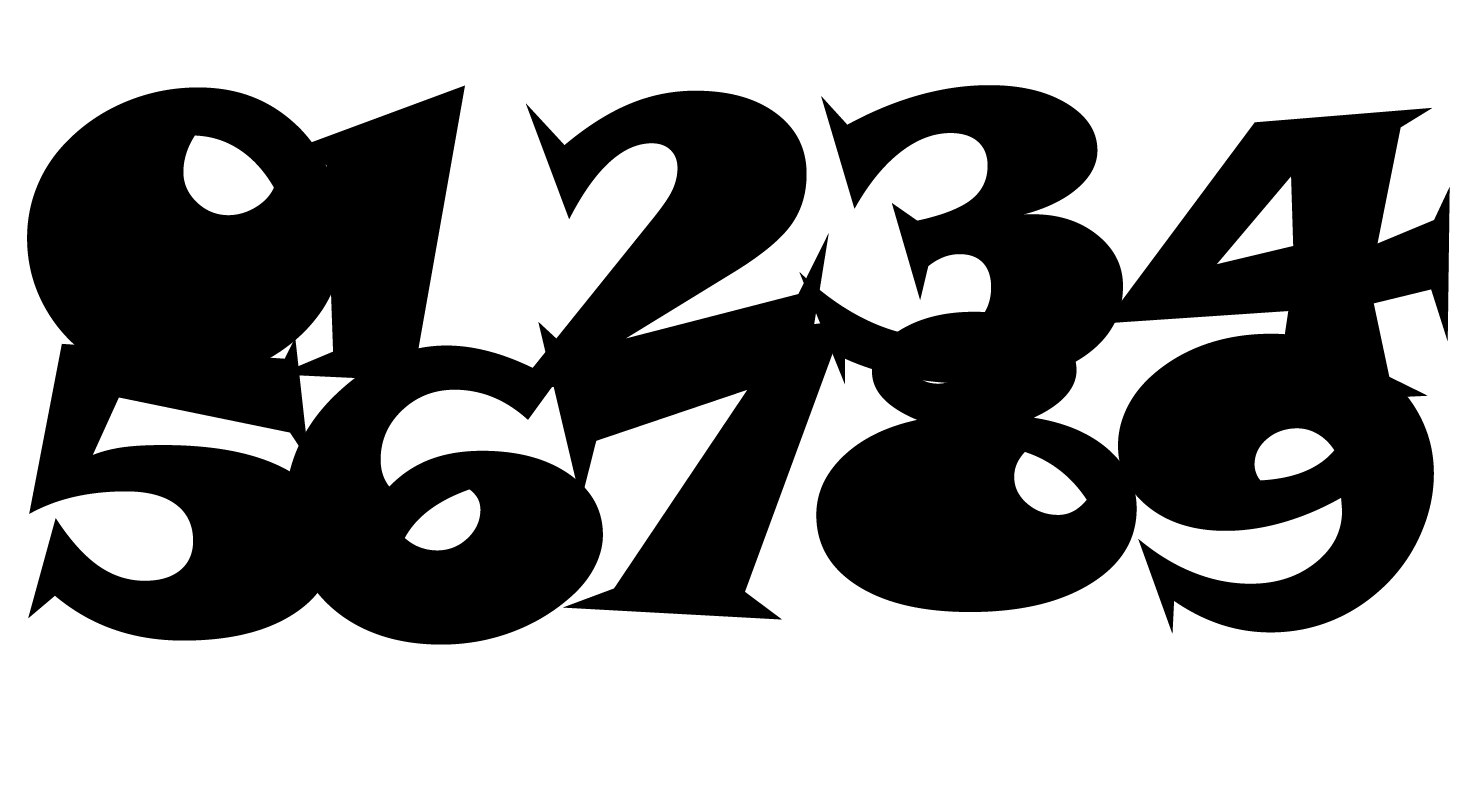
<style>
.page{position:relative;width:1472px;height:806px;background:#ffffff}
.page>*{position:absolute;margin:0}
.t1{font:400px "SnapITC-Regular";color:#000000}
</style>
<div class="page">
<p class="t1" style="left:27px;top:87px;width:317px;height:296px">0</p>
<p class="t1" style="left:264px;top:85px;width:205px;height:299px">1</p>
<p class="t1" style="left:799px;top:85px;width:324px;height:300px">3</p>
<p class="t1" style="left:515px;top:90px;width:314px;height:300px">2</p>
<p class="t1" style="left:1105px;top:107px;width:345px;height:298px">4</p>
<p class="t1" style="left:816px;top:311px;width:321px;height:301px">8</p>
<p class="t1" style="left:538px;top:320px;width:307px;height:300px">7</p>
<p class="t1" style="left:28px;top:338px;width:307px;height:303px">5</p>
<p class="t1" style="left:1118px;top:333px;width:316px;height:301px">9</p>
<p class="t1" style="left:285px;top:344px;width:318px;height:301px">6</p>
</div>
